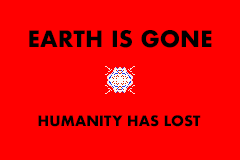
<style>
.page{position:relative;width:240px;height:160px;background:#ff0000}
.page>*{position:absolute;margin:0}
.t1{font:22px "Futura-Bold";color:#000000;text-transform:uppercase}
.t2{font:14px "Futura-Bold";color:#000000;text-transform:uppercase}
</style>
<div class="page">
<p class="t1" style="left:29px;top:30px;width:183px;height:18px">Earth is gone</p>
<p class="t2" style="left:38px;top:115px;width:163px;height:12px">humanity has lost</p>
</div>
